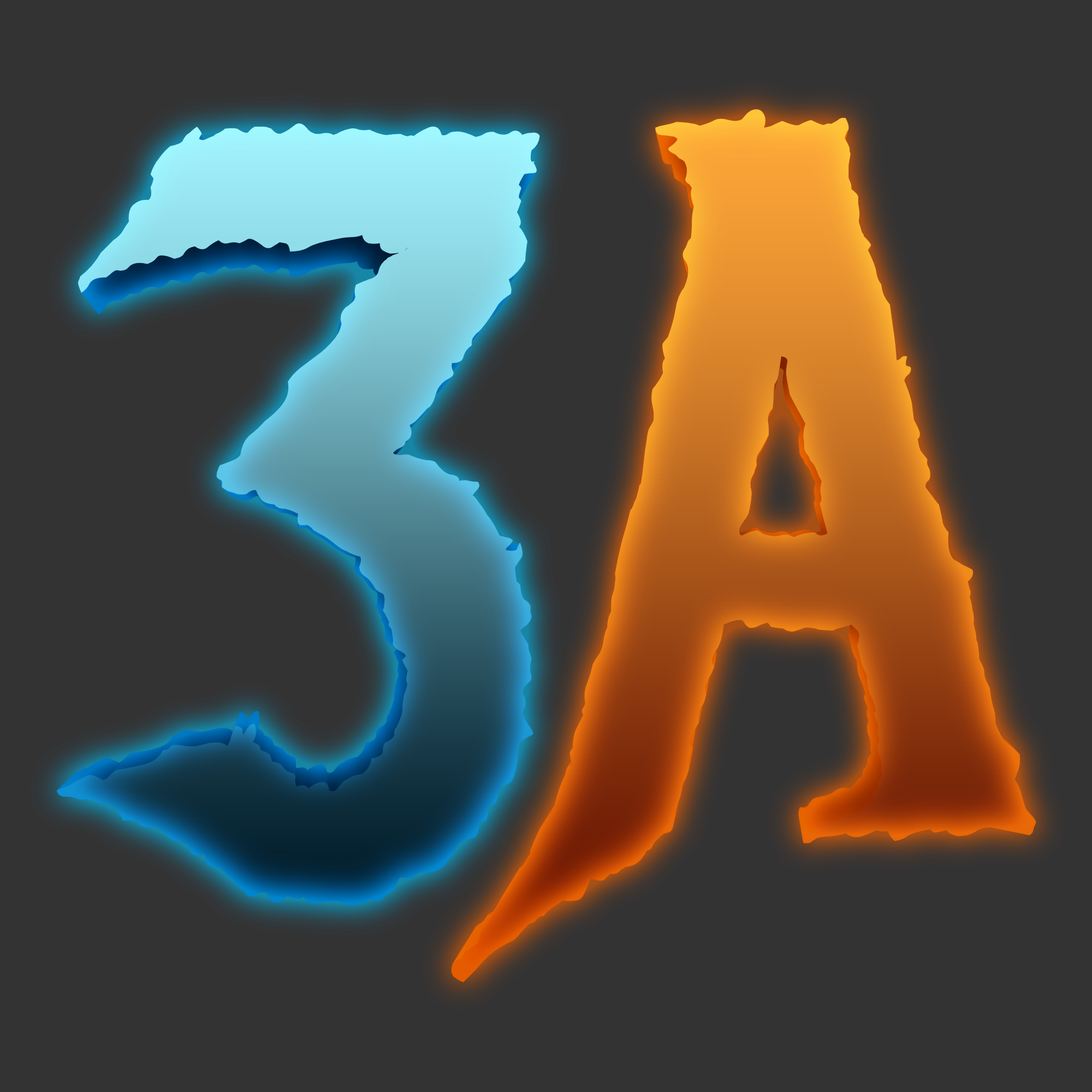
<style>
.page{position:relative;width:1092px;height:1092px;background:#333333}
.page>*{position:absolute;margin:0}
.t1{font:984.3px "MetalMania-Regular"}
.t2{font:1057.2px "MetalMania-Regular"}
</style>
<div class="page">
<p class="t1" style="left:451px;top:109px;width:585px;height:873px">A</p>
<p class="t2" style="left:56px;top:123px;width:484px;height:782px">3</p>
</div>
